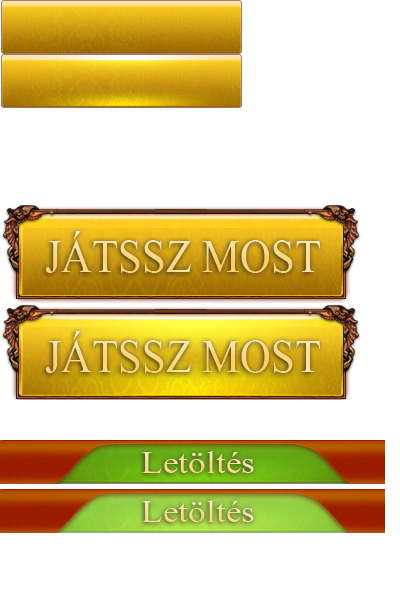
<style>
.page{position:relative;width:400px;height:589px;background:#ffffff}
.page>*{position:absolute;margin:0}
.t1{font:57.8px "Aparajita";scale:0.92 1}
.t2{font:38.6px "Aparajita";scale:1.14 1}
</style>
<div class="page">
<p class="t1" style="left:45px;top:231px;width:275px;height:42px">JÁTSSZ MOST</p>
<p class="t1" style="left:45px;top:331px;width:275px;height:42px">JÁTSSZ MOST</p>
<p class="t2" style="left:141px;top:451px;width:113px;height:22px">Letöltés</p>
<p class="t2" style="left:141px;top:500px;width:113px;height:22px">Letöltés</p>
</div>
